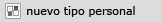
<style>
.page{position:relative;width:161px;height:22px;background:#dcdcdc}
.page>*{position:absolute;margin:0}
.t1{font:11px "Verdana";color:#000000}
</style>
<div class="page">
<p class="t1" style="left:27px;top:6px;width:108px;height:11px">nuevo tipo personal</p>
</div>
